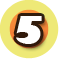
<style>
.page{position:relative;width:59px;height:59px;background:#eee977}
.page>*{position:absolute;margin:0}
.t1{font:37.4px "GillSans-UltraBold";letter-spacing:0.1em;color:#ffffff}
</style>
<div class="page">
<p class="t1" style="left:16px;top:16px;width:26px;height:28px">5</p>
</div>
